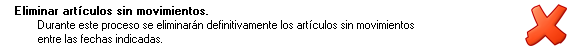
<style>
.page{position:relative;width:582px;height:52px;background:#ffffff}
.page>*{position:absolute;margin:0}
.t1{font:11.4px "MS Sans Serif";color:#000000;font-weight:bold}
.t2{font:11.4px "MS Sans Serif";color:#000000}
</style>
<div class="page">
<p class="t1" style="left:15px;top:6px;width:193px;height:9px">Eliminar artículos sin movimientos.</p>
<p class="t2" style="left:38px;top:20px;width:376px;height:23px">Durante este proceso se eliminarán definitivamente los artículos sin movimientos<br>entre las fechas indicadas.</p>
</div>
